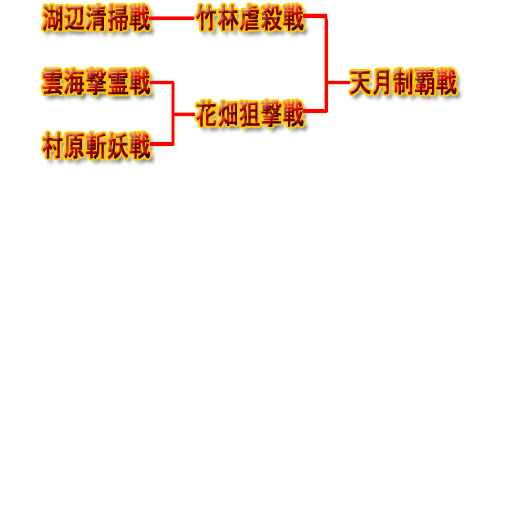
<style>
.page{position:relative;width:512px;height:512px;background:#ffffff}
.page>*{position:absolute;margin:0}
.t1{font:28.8px "MS-UIGothic";font-weight:bold;scale:0.75 1}
</style>
<div class="page">
<p class="t1" style="left:42px;top:4px;width:108px;height:27px">湖辺清掃戦</p>
<p class="t1" style="left:196px;top:4px;width:108px;height:27px">竹林虐殺戦</p>
<p class="t1" style="left:42px;top:68px;width:108px;height:27px">雲海撃霊戦</p>
<p class="t1" style="left:350px;top:68px;width:107px;height:28px">天月制覇戦</p>
<p class="t1" style="left:196px;top:100px;width:108px;height:27px">花畑狙撃戦</p>
<p class="t1" style="left:42px;top:132px;width:108px;height:27px">村原斬妖戦</p>
</div>
